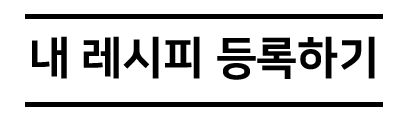
<style>
.page{position:relative;width:413px;height:124px;background:#ffffff}
.page>*{position:absolute;margin:0}
.t1{font:45px "NanumSquareEB";color:#000000}
</style>
<div class="page">
<p class="t1" style="left:32px;top:36px;width:343px;height:44px">내 레시피 등록하기</p>
</div>
